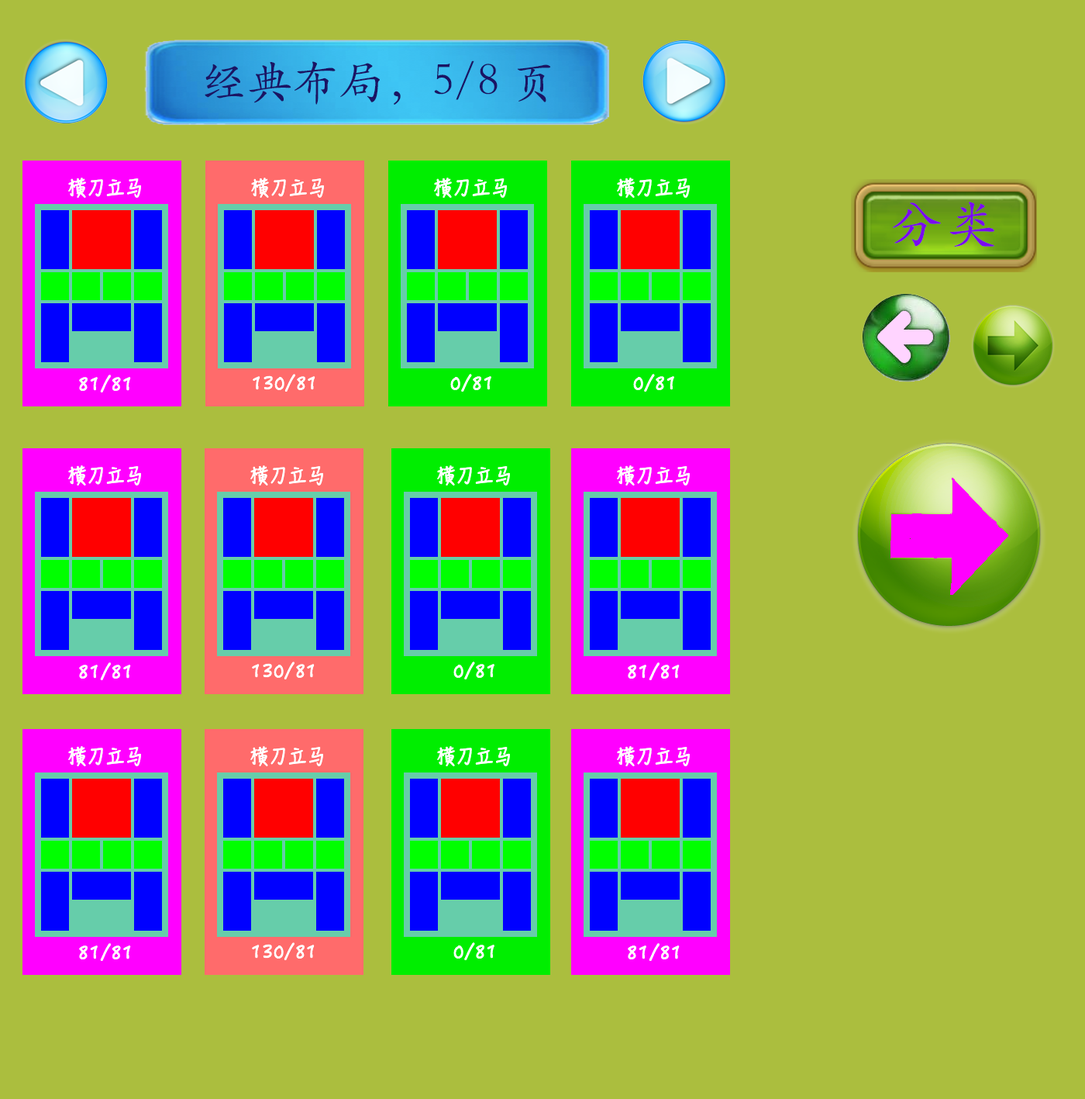
<style>
.page{position:relative;width:1085px;height:1099px;background:#abbe3e}
.page>*{position:absolute;margin:0}
.t1{font:46.5px "STKaiti";color:#1b1464}
.t2{font:18.6px "HanziPenSC-W5";color:#ffffff}
.t3{font:53px "STKaiti";color:#7b09f0;scale:1.03 1}
</style>
<div class="page">
<p class="t1" style="left:205px;top:60px;width:346px;height:45px">经典布局，5/8页</p>
<p class="t2" style="left:68px;top:178px;width:73px;height:20px">横刀立马</p>
<p class="t2" style="left:251px;top:178px;width:73px;height:20px">横刀立马</p>
<p class="t2" style="left:434px;top:178px;width:73px;height:20px">横刀立马</p>
<p class="t3" style="left:893px;top:202px;width:102px;height:45px">分类</p>
<p class="t2" style="left:79px;top:374px;width:52px;height:18px">81/81</p>
<p class="t2" style="left:253px;top:374px;width:63px;height:18px">130/81</p>
<p class="t2" style="left:450px;top:374px;width:42px;height:18px">0/81</p>
</div>
